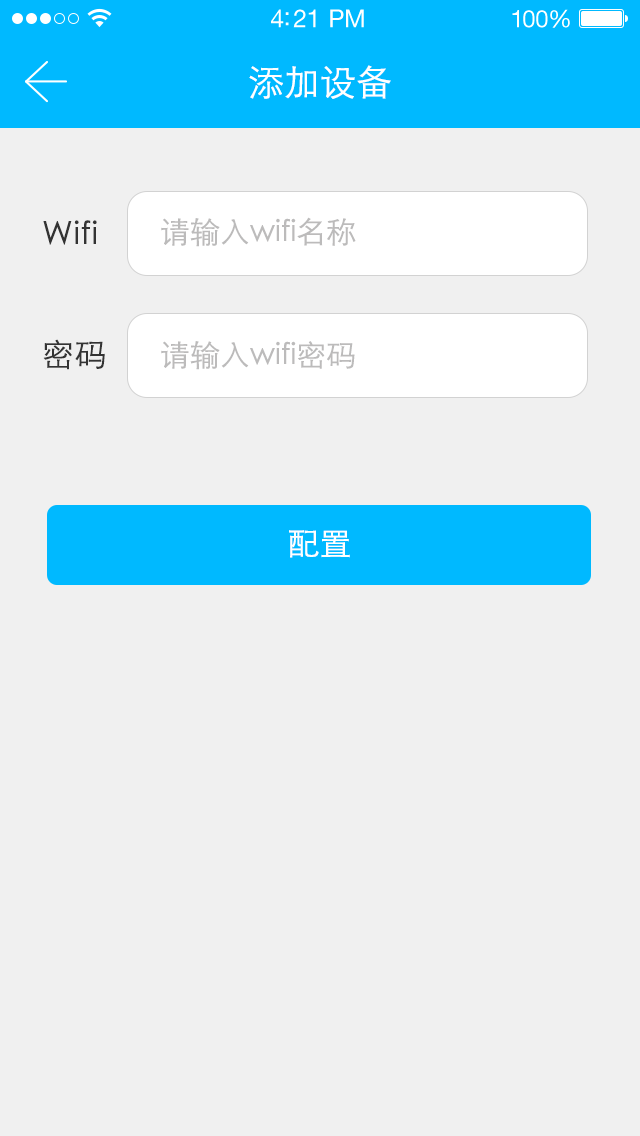
<style>
.page{position:relative;width:640px;height:1136px;background:#f0f0f0}
.page>*{position:absolute;margin:0}
.t1{font:25px "HelveticaNeueLTStd-Roman";letter-spacing:-0.02em;color:#ffffff}
.t2{font:24px "HelveticaNeueLTStd-Roman";letter-spacing:-0.02em;color:#ffffff}
.t3{font:36px "STXihei";color:#ffffff;text-transform:uppercase}
.t4{font:32px "STXihei";letter-spacing:0.025em;color:#333333}
.t5{font:30px "STXihei";color:#bcbbbb}
.t6{font:32px "STXihei";color:#ffffff}
</style>
<div class="page">
<p class="t1" style="left:271px;top:9px;width:93px;height:19px">4:21 PM</p>
<p class="t2" style="left:512px;top:9px;width:58px;height:19px">100%</p>
<p class="t3" style="left:249px;top:65px;width:142px;height:34px">添加设备</p>
<p class="t4" style="left:43px;top:220px;width:54px;height:25px">Wifi</p>
<p class="t5" style="left:161px;top:217px;width:195px;height:30px">请输入wifi名称</p>
<p class="t4" style="left:43px;top:339px;width:62px;height:31px">密码</p>
<p class="t5" style="left:161px;top:341px;width:194px;height:29px">请输入wifi密码</p>
<p class="t6" style="left:289px;top:530px;width:61px;height:28px">配置</p>
</div>
